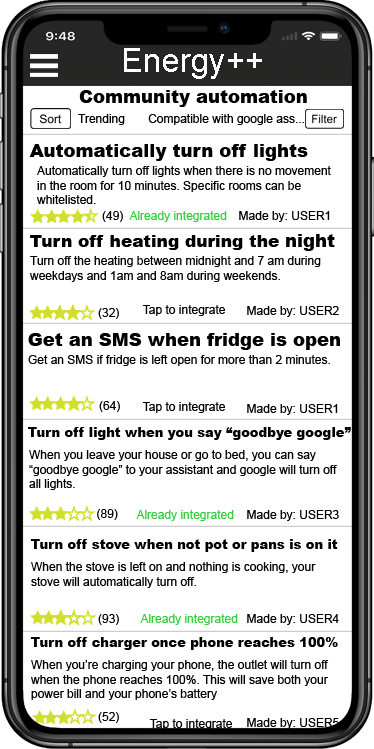
<style>
.page{position:relative;width:374px;height:749px;background:#ffffff}
.page>*{position:absolute;margin:0}
.t1{font:33.1px "ArialMT";color:#ffffff}
.t2{font:18px "Arial-Black";color:#000000}
.t3{font:12px "ArialMT";color:#000000}
.t4{font:12px "ArialMT";color:#2dd038}
.t5{font:17px "Arial-Black";color:#000000}
.t6{font:13px "Arial-Black";color:#000000}
</style>
<div class="page">
<p class="t1" style="left:124px;top:48px;width:138px;height:31px">Energy++</p>
<p class="t2" style="left:79px;top:90px;width:228px;height:17px">Community automation</p>
<p class="t3" style="left:78px;top:114px;width:47px;height:11px">Trending</p>
<p class="t3" style="left:148px;top:114px;width:156px;height:11px">Compatible with google ass...</p>
<p class="t2" style="left:29px;top:144px;width:279px;height:17px">Automatically turn off lights</p>
<p class="t3" style="left:37px;top:166px;width:294px;height:38px">Automatically turn off lights when there is no movement in the room for 10 minutes. Specific rooms can be whitelisted.</p>
<p class="t3" style="left:102px;top:211px;width:21px;height:11px">(49)</p>
<p class="t4" style="left:129px;top:211px;width:98px;height:11px">Already integrated</p>
<p class="t3" style="left:239px;top:211px;width:91px;height:11px">Made by: USER1</p>
<p class="t5" style="left:30px;top:234px;width:305px;height:17px">Turn off heating during the <span class="t2">night</span></p>
<p class="t3" style="left:30px;top:256px;width:291px;height:26px">Turn off the heating between midnight and 7 am during weekdays and 1am and 8am during weekends.</p>
<p class="t3" style="left:142px;top:305px;width:83px;height:11px">Tap to integrate</p>
<p class="t3" style="left:98px;top:308px;width:21px;height:11px">(32)</p>
<p class="t3" style="left:247px;top:306px;width:92px;height:11px">Made by: USER2</p>
<p class="t2" style="left:28px;top:333px;width:312px;height:17px">Get an SMS when fridge is open</p>
<p class="t3" style="left:28px;top:355px;width:302px;height:11px">Get an SMS if fridge is left open for more than 2 minutes.</p>
<p class="t3" style="left:99px;top:401px;width:21px;height:11px">(64)</p>
<p class="t3" style="left:142px;top:402px;width:83px;height:11px">Tap to integrate</p>
<p class="t3" style="left:247px;top:404px;width:91px;height:11px">Made by: USER1</p>
<p class="t6" style="left:28px;top:427px;width:323px;height:13px">Turn off light when you say “goodbye google”</p>
<p class="t3" style="left:29px;top:450px;width:308px;height:40px">When you leave your house or go to bed, you can say “goodbye google” to your assistant and google will turn off all lights.</p>
<p class="t3" style="left:97px;top:509px;width:21px;height:11px">(89)</p>
<p class="t4" style="left:136px;top:510px;width:98px;height:11px">Already integrated</p>
<p class="t3" style="left:247px;top:510px;width:92px;height:11px">Made by: USER3</p>
<p class="t6" style="left:31px;top:539px;width:307px;height:13px">Turn off stove when not pot or pans is on it</p>
<p class="t3" style="left:31px;top:562px;width:285px;height:26px">When the stove is left on and nothing is cooking, your stove will automatically turn off.</p>
<p class="t3" style="left:98px;top:614px;width:21px;height:11px">(93)</p>
<p class="t4" style="left:140px;top:614px;width:98px;height:11px">Already integrated</p>
<p class="t3" style="left:247px;top:614px;width:92px;height:11px">Made by: USER4</p>
<p class="t6" style="left:31px;top:637px;width:307px;height:13px">Turn off charger once phone reaches 100%</p>
<p class="t3" style="left:31px;top:660px;width:298px;height:40px">When you’re charging your phone, the outlet will turn off when the phone reaches 100%. This will save both your power bill and your phone’s battery</p>
<p class="t3" style="left:98px;top:712px;width:21px;height:11px">(52)</p>
<p class="t3" style="left:149px;top:719px;width:83px;height:11px">Tap to integrate</p>
<p class="t3" style="left:247px;top:718px;width:92px;height:11px">Made by: USER5</p>
</div>
